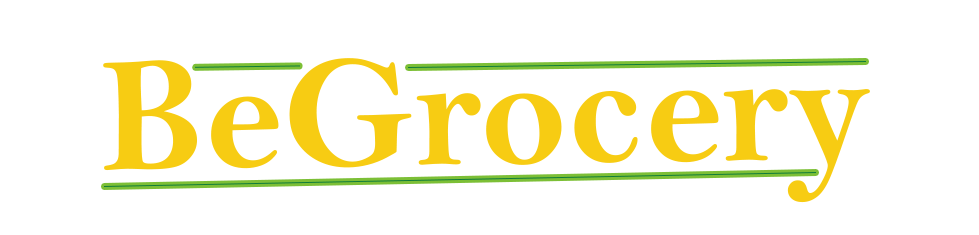
<style>
.page{position:relative;width:979px;height:235px;background:#ffffff}
.page>*{position:absolute;margin:0}
.t1{font:163.6px "BellMTBold";color:#f7cc13}
</style>
<div class="page">
<p class="t1" style="left:103px;top:58px;width:767px;height:145px;rotate:-1deg">BeGrocery</p>
</div>
